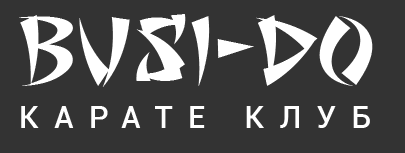
<style>
.page{position:relative;width:405px;height:153px;background:#333333}
.page>*{position:absolute;margin:0}
.t1{font:94.4px "SevenMonkeyFuryBB";color:#ffffff;text-transform:uppercase}
.t2{font:31px "Roboto-Medium";letter-spacing:0.49em;color:#ffffff;text-transform:uppercase}
</style>
<div class="page">
<p class="t1" style="left:19px;top:14px;width:354px;height:73px">busi-do</p>
<p class="t2" style="left:21px;top:106px;width:349px;height:22px">карате клуб</p>
</div>
